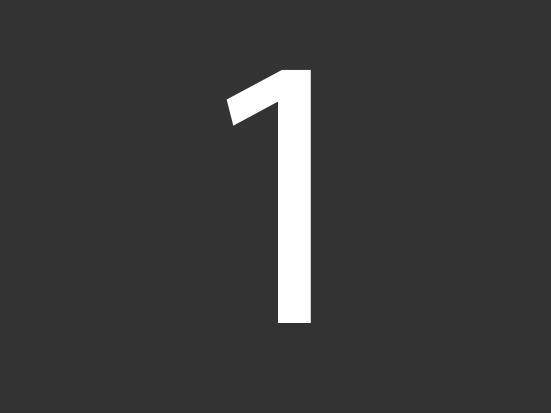
<style>
.page{position:relative;width:551px;height:413px;background:#333333}
.page>*{position:absolute;margin:0}
.t1{font:388.9px "MyriadHebrew-Regular";color:#ffffff}
</style>
<div class="page">
<p class="t1" style="left:226px;top:69px;width:85px;height:254px">1</p>
</div>
